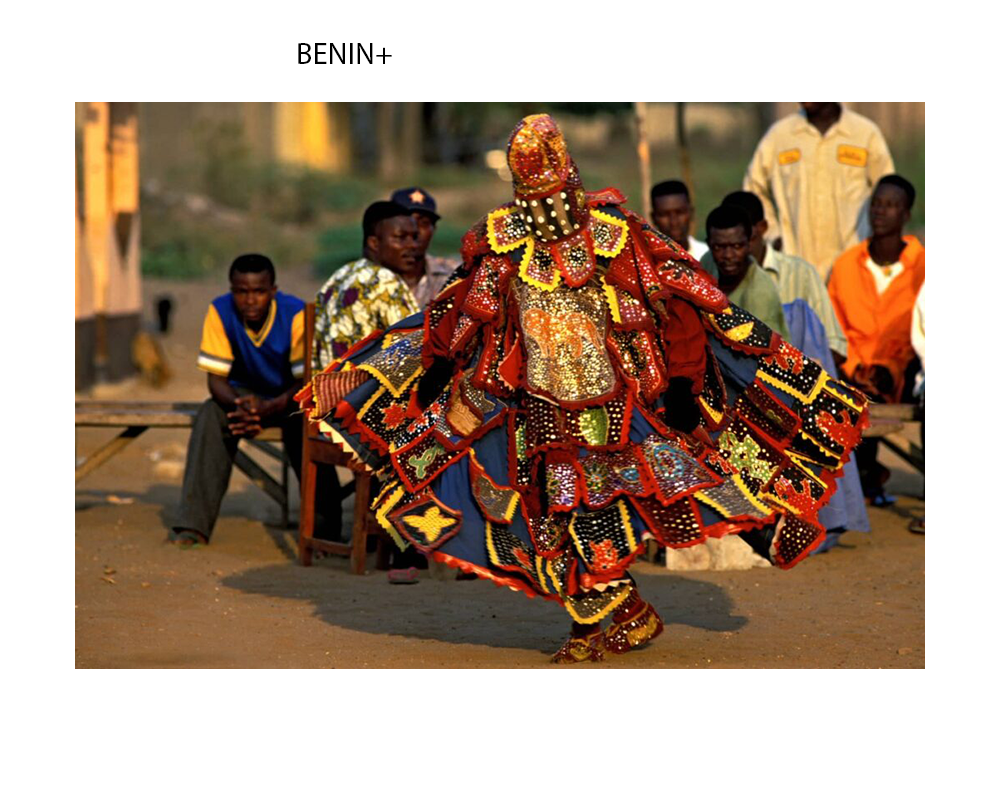
<style>
.page{position:relative;width:1000px;height:800px;background:#ffffff}
.page>*{position:absolute;margin:0}
.t1{font:30.5px "MyriadPro-Regular";color:#000000}
</style>
<div class="page">
<p class="t1" style="left:298px;top:43px;width:94px;height:21px">BENIN+</p>
</div>
